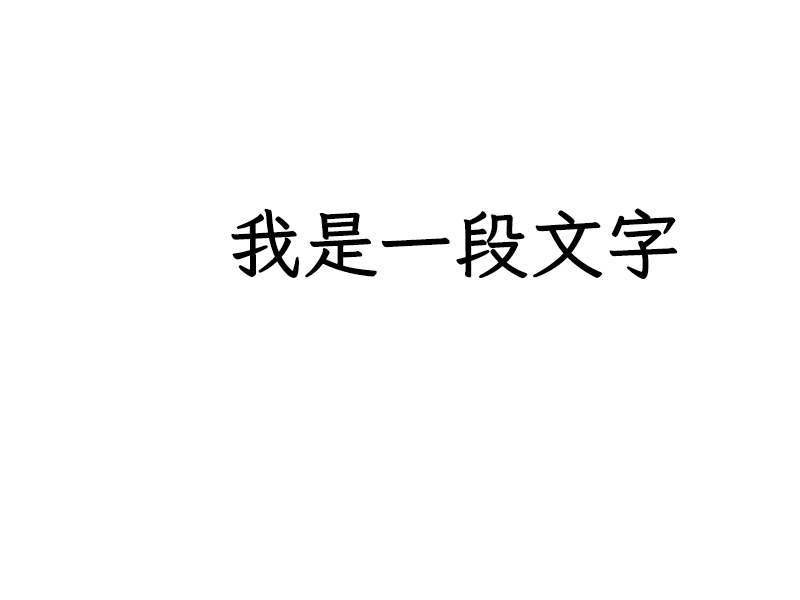
<style>
.page{position:relative;width:800px;height:600px;background:#ffffff}
.page>*{position:absolute;margin:0}
.t1{font:75.8px "LXGWWenKaiGBScreen";color:#000000}
</style>
<div class="page">
<p class="t1" style="left:231px;top:208px;width:447px;height:71px">我是一段文字</p>
</div>
